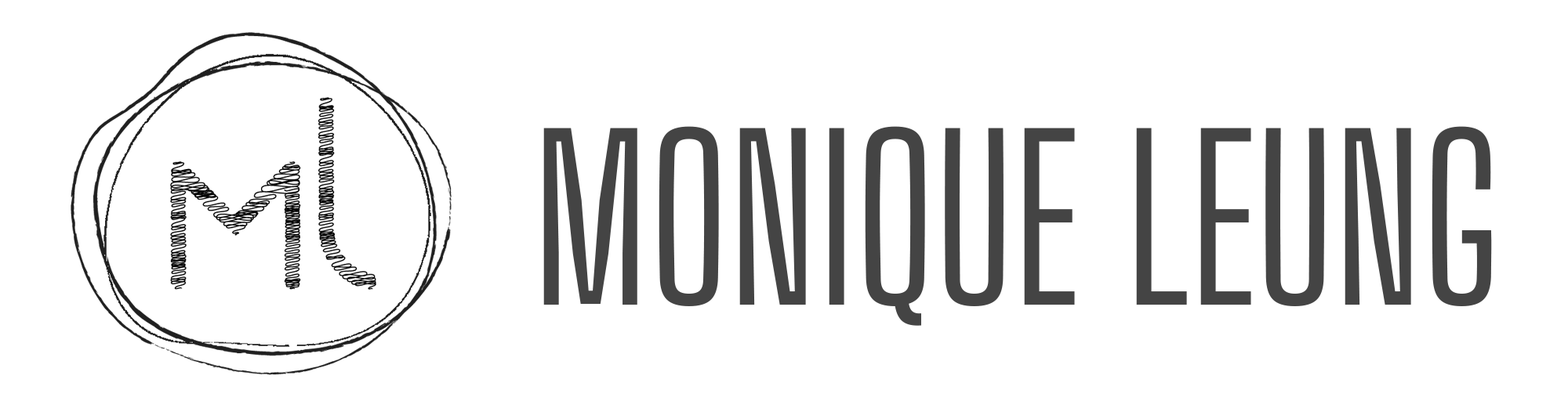
<style>
.page{position:relative;width:1568px;height:408px;background:#ffffff}
.page>*{position:absolute;margin:0}
.t1{font:220.9px "BigShouldersDisplay-Regular";color:#444444}
</style>
<div class="page">
<p class="t1" style="left:543px;top:126px;width:949px;height:200px">MONIQUE LEUNG</p>
</div>
